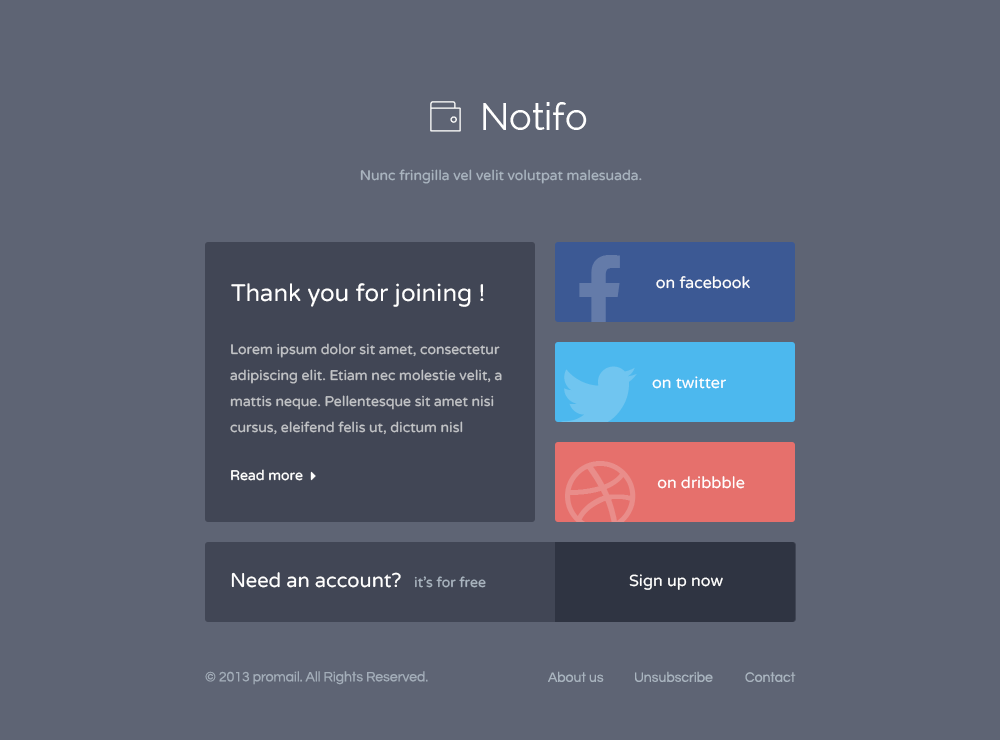
<style>
.page{position:relative;width:1000px;height:740px;background:#5e6474}
.page>*{position:absolute;margin:0}
.t1{font:14px "VarelaRound-Regular";color:#a9b4bf}
.t2{font:16px "VarelaRound-Regular";color:#ffffff}
.t3{font:24px "VarelaRound-Regular";color:#ffffff}
.t4{font:14px/26px "VarelaRound-Regular";color:#c1c3c6}
.t5{font:14px "VarelaRound-Regular";color:#ffffff}
.t6{font:20px "VarelaRound-Regular";color:#ffffff}
.t7{font:14px "Questrial-Regular";color:#a9b4bf}
</style>
<div class="page">
<p class="t1" style="left:360px;top:169px;width:282px;height:15px">Nunc fringilla vel velit volutpat malesuada.</p>
<p class="t2" style="left:656px;top:276px;width:94px;height:13px">on facebook</p>
<p class="t3" style="left:231px;top:283px;width:253px;height:24px">Thank you for joining !</p>
<p class="t4" style="left:230px;top:343px;width:272px;height:92px">Lorem ipsum dolor sit amet, consectetur adipiscing elit. Etiam nec molestie velit, a mattis neque. Pellentesque sit amet nisi cursus, eleifend felis ut, dictum nisl</p>
<p class="t2" style="left:652px;top:376px;width:74px;height:13px">on twitter</p>
<p class="t5" style="left:231px;top:469px;width:72px;height:12px">Read more</p>
<p class="t2" style="left:657px;top:476px;width:88px;height:13px">on dribbble</p>
<p class="t6" style="left:231px;top:572px;width:170px;height:16px">Need an account?</p>
<p class="t1" style="left:414px;top:576px;width:72px;height:12px">it’s for free</p>
<p class="t2" style="left:629px;top:574px;width:94px;height:16px">Sign up now</p>
<p class="t7" style="left:205px;top:671px;width:223px;height:14px;opacity:0.9">© 2013 promail. All Rights Reserved.</p>
<p class="t7" style="left:548px;top:671px;width:56px;height:11px">About us</p>
<p class="t7" style="left:635px;top:671px;width:78px;height:11px">Unsubscribe</p>
<p class="t7" style="left:745px;top:672px;width:51px;height:10px">Contact</p>
</div>
